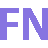
<style>
.page{position:relative;width:48px;height:48px;background:#ffffff}
.page>*{position:absolute;margin:0}
.t1{font:46px "MyriadPro-Bold";letter-spacing:-0.025em;color:#8774e1}
</style>
<div class="page">
<p class="t1" style="left:0px;top:8px;width:48px;height:32px">FN</p>
</div>
